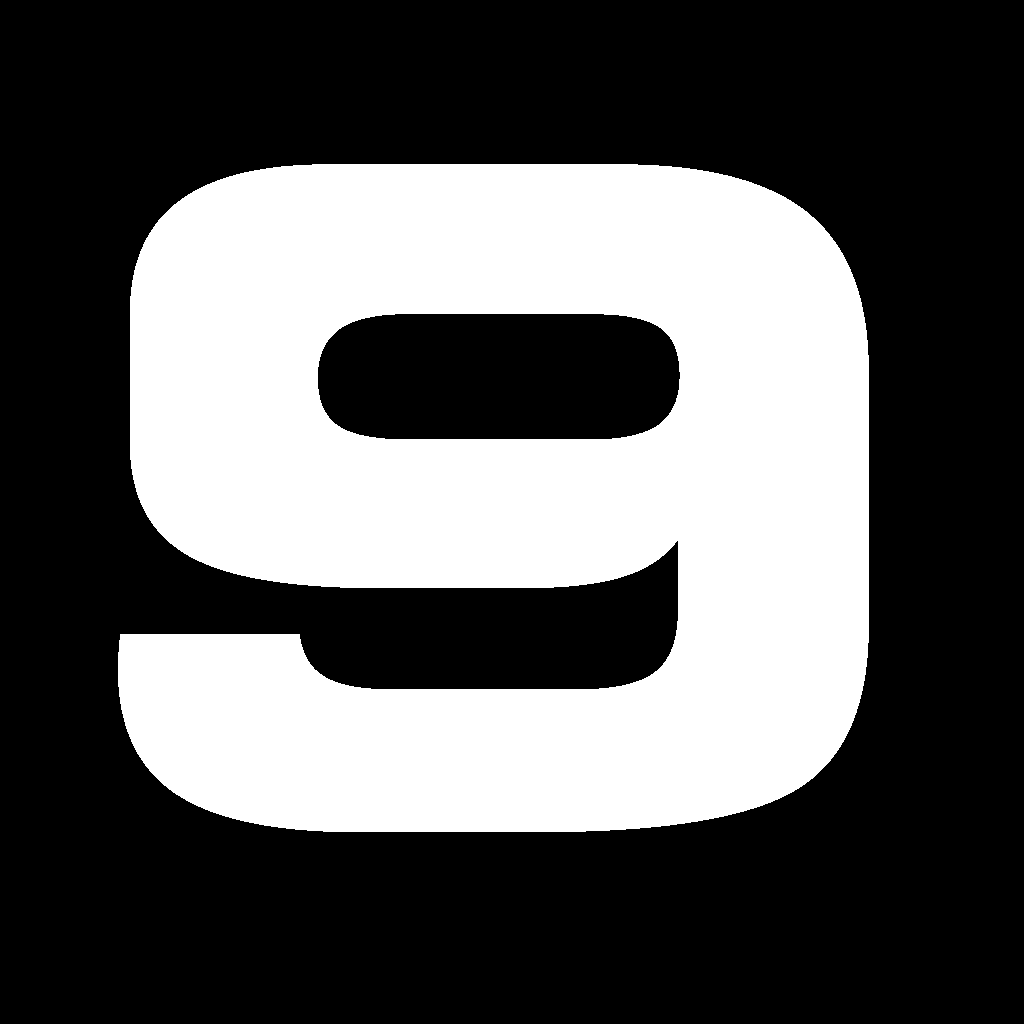
<style>
.page{position:relative;width:1024px;height:1024px;background:#000000}
.page>*{position:absolute;margin:0}
.t1{font:895.8px "Square721BT-BoldExtended";color:#ffffff}
</style>
<div class="page">
<p class="t1" style="left:118px;top:164px;width:751px;height:668px">9</p>
</div>
